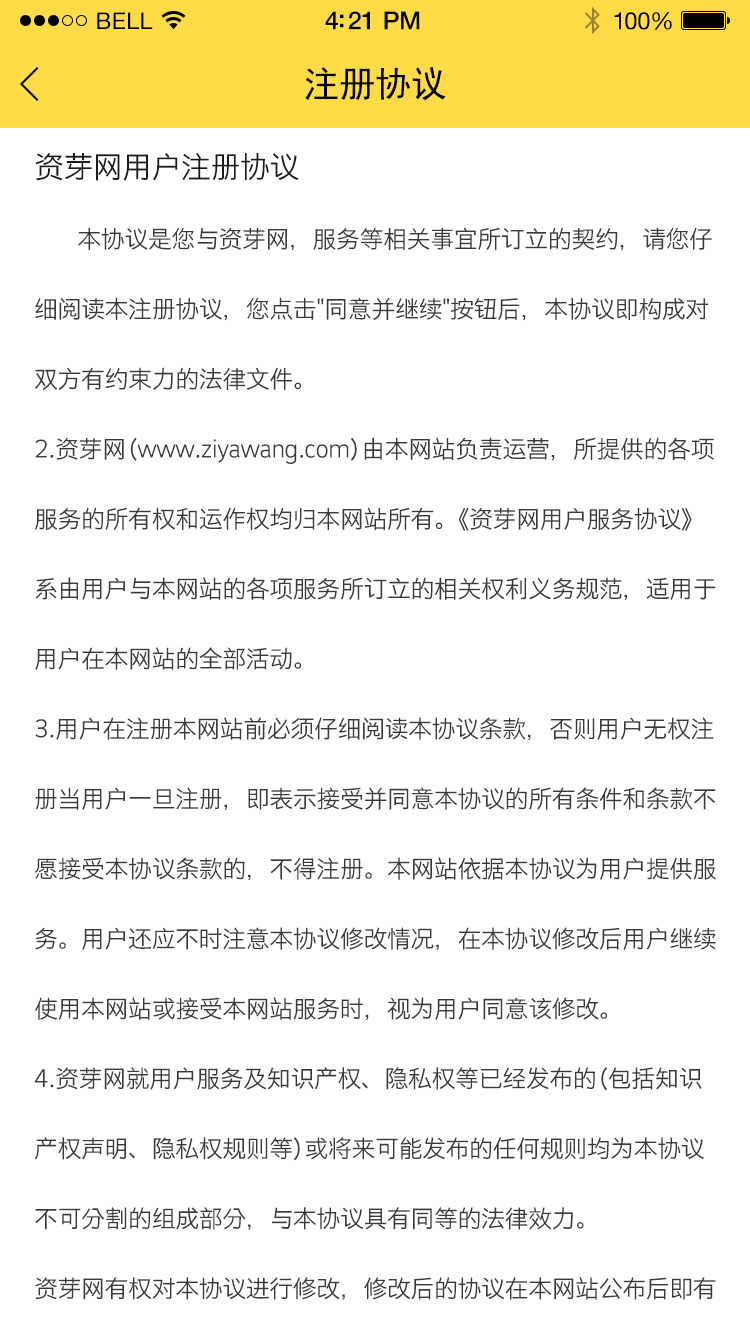
<style>
.page{position:relative;width:750px;height:1334px;background:#ffffff}
.page>*{position:absolute;margin:0}
.t1{font:23px "HelveticaNeue";letter-spacing:0.02em;color:#000000}
.t2{font:25px "HelveticaNeue-Medium";letter-spacing:-0.02em;color:#000000}
.t3{font:24px "HelveticaNeue";letter-spacing:-0.02em;color:#010101}
.t4{font:36px "SimHei";color:#000000}
.t5{font:24px/70px "STHeitiSC-Light";letter-spacing:-0.02em;color:#393939}
.t6{font:30px/70px "STHeitiSC-Light";letter-spacing:-0.02em;color:#1a1a1a}
</style>
<div class="page">
<p class="t1" style="left:97px;top:12px;width:56px;height:17px">BELL</p>
<p class="t1" style="left:97px;top:12px;width:56px;height:17px">BELL</p>
<p class="t2" style="left:325px;top:11px;width:95px;height:19px">4:21 PM</p>
<p class="t2" style="left:325px;top:11px;width:95px;height:19px">4:21 PM</p>
<p class="t3" style="left:614px;top:12px;width:58px;height:18px">100%</p>
<p class="t3" style="left:614px;top:12px;width:58px;height:18px">100%</p>
<p class="t4" style="left:305px;top:66px;width:141px;height:35px">注册协议</p>
<p class="t5" style="left:34px;top:152px;width:682px;height:1148px"><span class="t6">资芽网用户注册协议<br></span>          本协议是您与资芽网，服务等相关事宜所订立的契约，请您仔<br>细阅读本注册协议，您点击"同意并继续"按钮后，本协议即构成对<br>双方有约束力的法律文件。<br>2.资芽网（www.ziyawang.com）由本网站负责运营，所提供的各项<br>服务的所有权和运作权均归本网站所有。《资芽网用户服务协议》<br>系由用户与本网站的各项服务所订立的相关权利义务规范，适用于<br>用户在本网站的全部活动。<br>3.用户在注册本网站前必须仔细阅读本协议条款，否则用户无权注<br>册当用户一旦注册，即表示接受并同意本协议的所有条件和条款不<br>愿接受本协议条款的，不得注册。本网站依据本协议为用户提供服<br>务。用户还应不时注意本协议修改情况，在本协议修改后用户继续<br>使用本网站或接受本网站服务时，视为用户同意该修改。<br>4.资芽网就用户服务及知识产权、隐私权等已经发布的（包括知识<br>产权声明、隐私权规则等）或将来可能发布的任何规则均为本协议<br>不可分割的组成部分，与本协议具有同等的法律效力。<br>资芽网有权对本协议进行修改，修改后的协议在本网站公布后即有</p>
</div>
